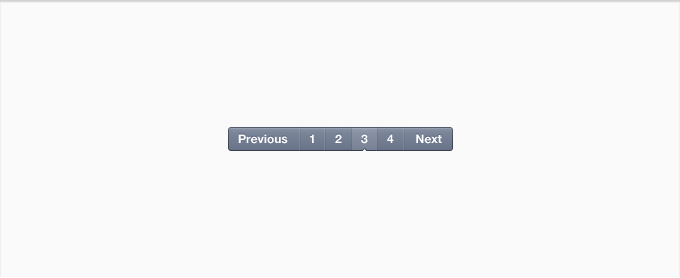
<style>
.page{position:relative;width:680px;height:278px;background:#fafafa}
.page>*{position:absolute;margin:0}
.t1{font:12px "HelveticaNeue-Bold";color:#ffffff}
</style>
<div class="page">
<p class="t1" style="left:238px;top:134px;width:50px;height:10px">Previous</p>
<p class="t1" style="left:310px;top:134px;width:4px;height:9px">1</p>
<p class="t1" style="left:335px;top:134px;width:7px;height:9px">2</p>
<p class="t1" style="left:361px;top:134px;width:7px;height:10px">3</p>
<p class="t1" style="left:387px;top:134px;width:7px;height:9px">4</p>
<p class="t1" style="left:416px;top:134px;width:26px;height:10px">Next</p>
</div>
